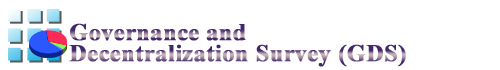
<style>
.page{position:relative;width:500px;height:70px;background:#ffffff}
.page>*{position:absolute;margin:0}
.t1{font:24px/21px "TimesNewRomanPS-BoldMT";font-weight:bold}
</style>
<div class="page">
<p class="t1" style="left:69px;top:23px;width:337px;height:44px">Governance and<br>Decentralization Survey (GDS)</p>
</div>
